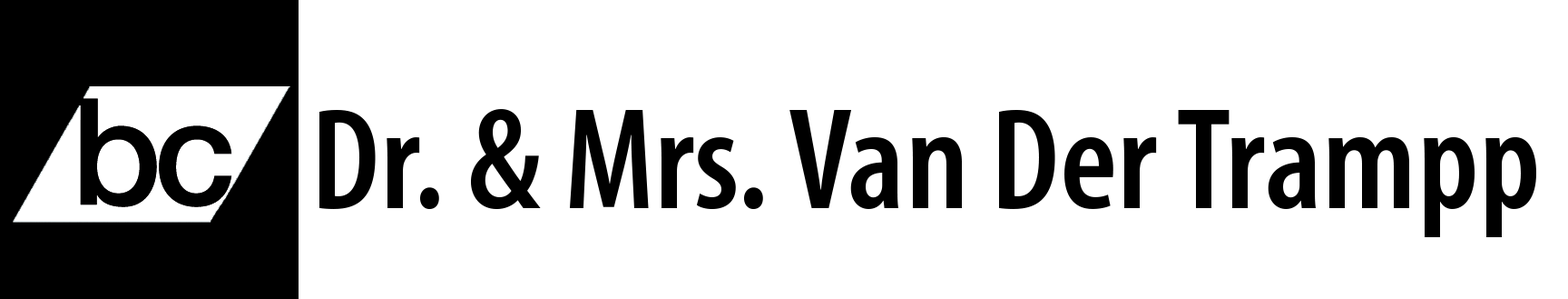
<style>
.page{position:relative;width:1568px;height:299px;background:#ffffff}
.page>*{position:absolute;margin:0}
.t1{font:145.2px "MyriadPro-SemiboldCond";color:#000000}
</style>
<div class="page">
<p class="t1" style="left:319px;top:109px;width:1217px;height:128px">Dr. &amp; Mrs. Van Der Trampp</p>
</div>
